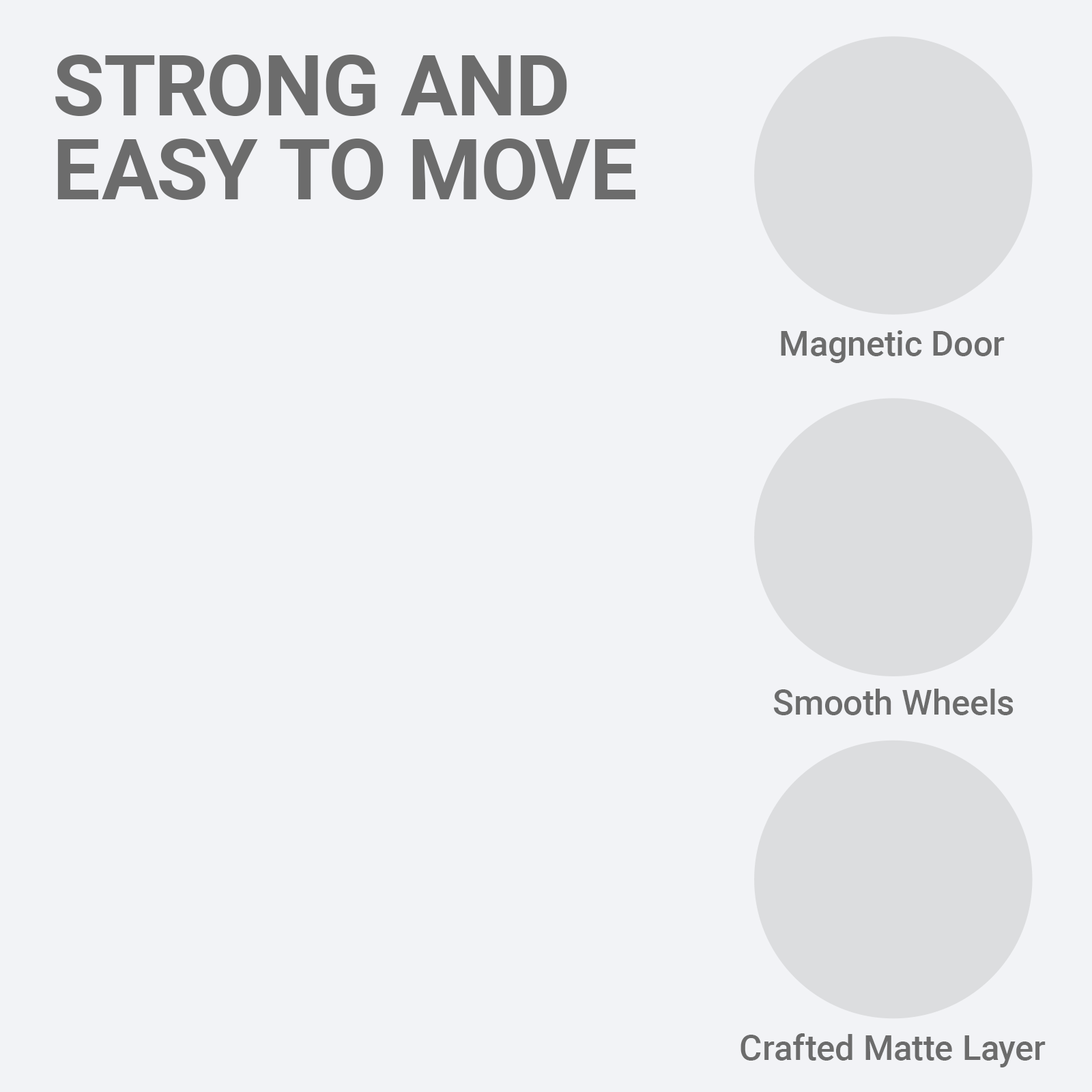
<style>
.page{position:relative;width:1092px;height:1092px;background:#f2f3f6}
.page>*{position:absolute;margin:0}
.t1{font:84.4px/84.4px "Roboto-Bold";color:#6c6c6c}
.t2{font:34.9px "Roboto-Medium";color:#6c6c6c}
</style>
<div class="page">
<p class="t1" style="left:55px;top:55px;width:580px;height:145px">STRONG AND<br>EASY TO MOVE</p>
<p class="t2" style="left:781px;top:330px;width:224px;height:33px">Magnetic Door</p>
<p class="t2" style="left:773px;top:689px;width:240px;height:26px">Smooth Wheels</p>
<p class="t2" style="left:741px;top:1033px;width:305px;height:34px">Crafted Matte Layer</p>
</div>
